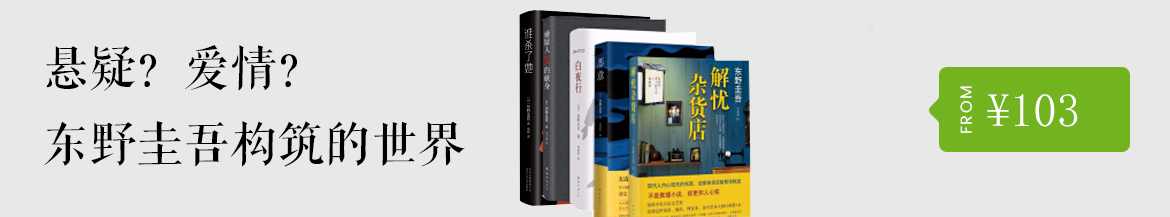
<style>
.page{position:relative;width:1170px;height:217px;background:#e8e8e8}
.page>*{position:absolute;margin:0}
.t1{font:47px/76px "FZQKBYSJW--GB1-0";color:#000000}
.t2{font:47px "SimSun";color:#ffffff}
</style>
<div class="page">
<p class="t1" style="left:44px;top:45px;width:421px;height:122px;text-align:justify">悬疑？爱情？<br>东野圭吾构筑的世界</p>
<p class="t2" style="left:987px;top:94px;width:91px;height:33px">¥103</p>
</div>
